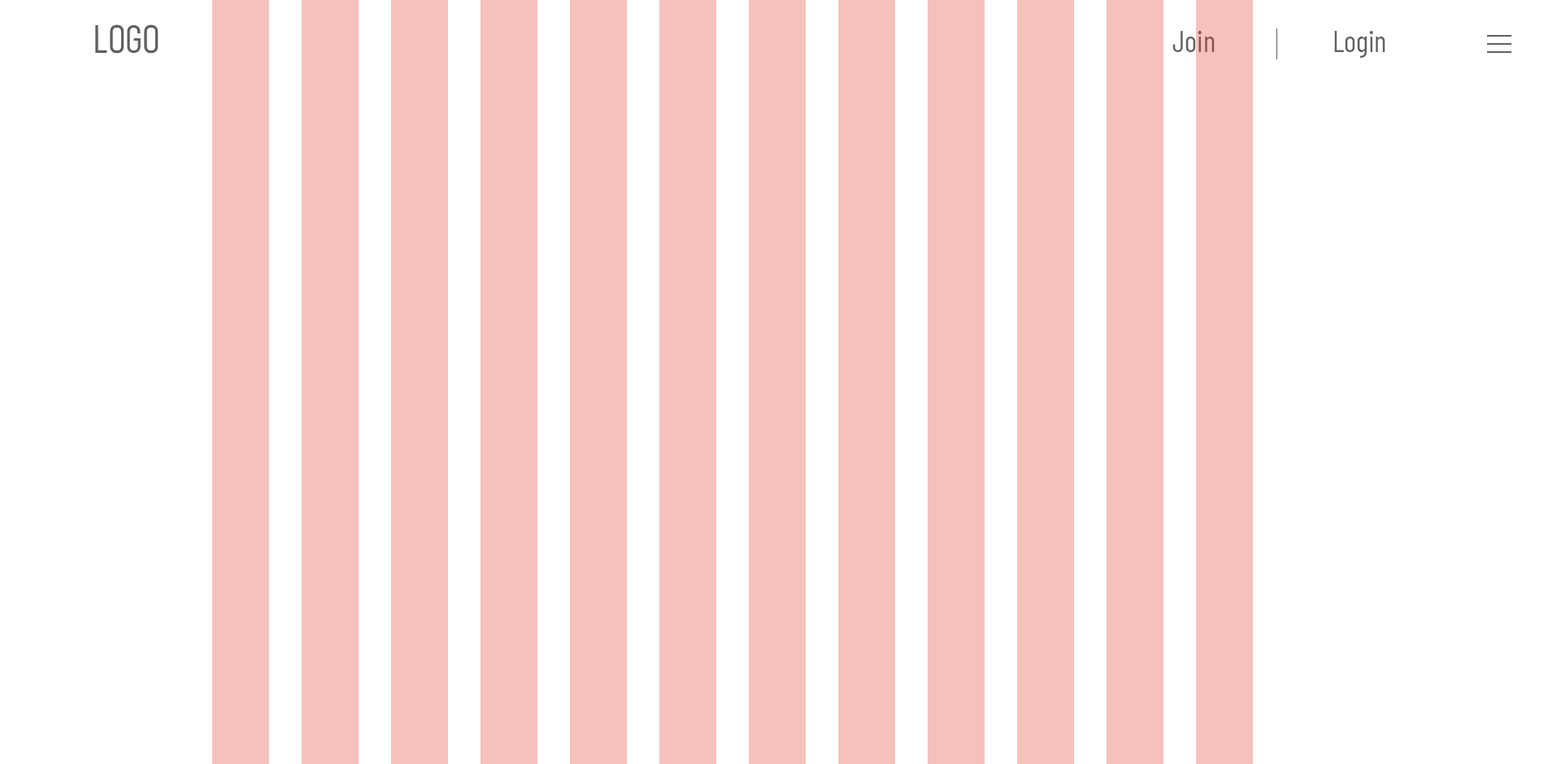
<style>
.page{position:relative;width:1561px;height:764px;background:#ffffff}
.page>*{position:absolute;margin:0}
.t1{font:39px "Bahnschrift-LightCondensed";color:#606060}
.t2{font:29.3px "BarlowCondensed-Regular"}
.t3{font:29.3px "BarlowCondensed-Regular";color:#606060}
</style>
<div class="page">
<p class="t1" style="left:95px;top:24px;width:64px;height:30px">LOGO</p>
<p class="t2" style="left:1173px;top:31px;width:42px;height:21px">Join</p>
<p class="t3" style="left:1335px;top:31px;width:51px;height:27px">Login</p>
</div>
